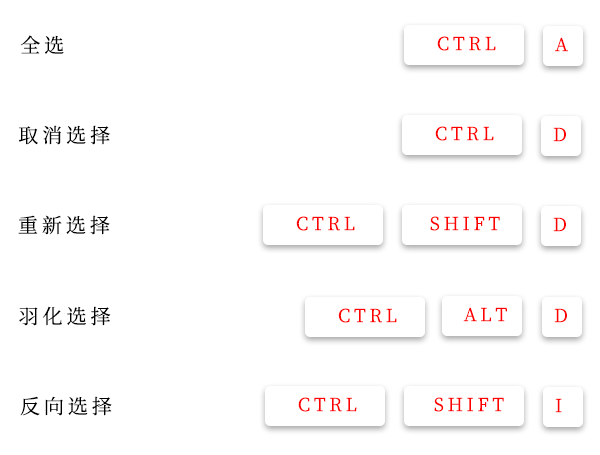
<style>
.page{position:relative;width:600px;height:455px;background:#ffffff}
.page>*{position:absolute;margin:0}
.t1{font:20px "SourceHanSerifCN-Regular";letter-spacing:0.2em;color:#000000}
.t2{font:18px "SourceHanSerifCN-Regular";letter-spacing:0.2em;color:#ff0000}
</style>
<div class="page">
<p class="t1" style="left:20px;top:35px;width:44px;height:19px">全选</p>
<p class="t2" style="left:437px;top:36px;width:59px;height:15px">CTRL</p>
<p class="t2" style="left:555px;top:37px;width:13px;height:15px">A</p>
<p class="t1" style="left:18px;top:125px;width:92px;height:20px">取消选择</p>
<p class="t2" style="left:435px;top:126px;width:59px;height:15px">CTRL</p>
<p class="t2" style="left:553px;top:127px;width:13px;height:15px">D</p>
<p class="t1" style="left:18px;top:215px;width:92px;height:20px">重新选择</p>
<p class="t2" style="left:296px;top:216px;width:59px;height:15px">CTRL</p>
<p class="t2" style="left:430px;top:216px;width:70px;height:15px">SHIFT</p>
<p class="t2" style="left:553px;top:217px;width:13px;height:15px">D</p>
<p class="t1" style="left:19px;top:306px;width:92px;height:20px">羽化选择</p>
<p class="t2" style="left:338px;top:308px;width:59px;height:15px">CTRL</p>
<p class="t2" style="left:463px;top:307px;width:44px;height:15px">ALT</p>
<p class="t2" style="left:554px;top:308px;width:13px;height:15px">D</p>
<p class="t1" style="left:20px;top:396px;width:92px;height:20px">反向选择</p>
<p class="t2" style="left:298px;top:397px;width:59px;height:15px">CTRL</p>
<p class="t2" style="left:434px;top:397px;width:70px;height:15px">SHIFT</p>
<p class="t2" style="left:555px;top:398px;width:7px;height:15px">I</p>
</div>
